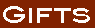
<style>
.page{position:relative;width:95px;height:28px;background:#812200}
.page>*{position:absolute;margin:0}
.t1{font:24px "BlairITC-Medium";color:#fdfaf9}
</style>
<div class="page">
<p class="t1" style="left:3px;top:6px;width:87px;height:17px">Gifts</p>
</div>
